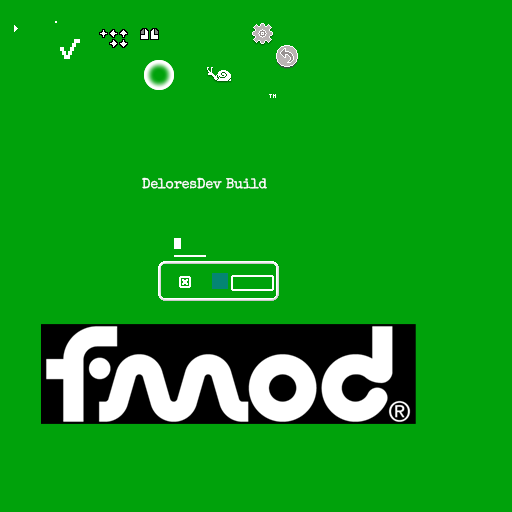
<style>
.page{position:relative;width:512px;height:512px;background:#00a20b}
.page>*{position:absolute;margin:0}
.t1{font:14px "SpecialElite-Regular";color:#ffffff}
</style>
<div class="page">
<p class="t1" style="left:142px;top:177px;width:125px;height:12px">DeloresDev Build</p>
</div>
